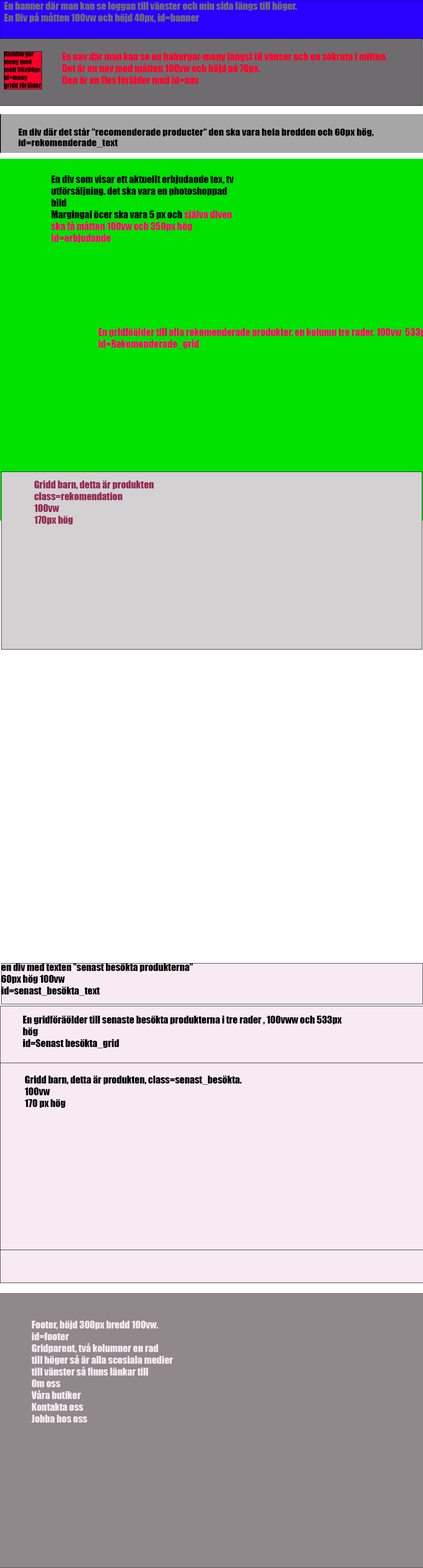
<style>
.page{position:relative;width:423px;height:1568px;background:#ffffff}
.page>*{position:absolute;margin:0}
.t1{font:9.8px "Impact";color:#6f6c70}
.t2{font:6.5px "Impact";color:#020202}
.t3{font:9.8px "Impact";color:#ff002a}
.t4{font:8.8px "Impact";color:#000000;scale:1.13 1}
.t5{font:9.8px "Impact";color:#000000}
.t6{font:9.8px "Impact";color:#ff006a}
.t7{font:9.8px "Impact";color:#952956}
.t8{font:9.8px "Impact";color:#f7eaf0}
</style>
<div class="page">
<p class="t1" style="left:4px;top:2px;width:293px;height:21px">En banner där man kan se loggan till vänster och min sida längs till höger.<br>En Div på måtten 100vw och höjd 40px, id=banner</p>
<p class="t2" style="left:4px;top:51px;width:37px;height:38px">Hamburgar meny med mått 96x96px<br>id=meny<br>gridd förälder</p>
<p class="t3" style="left:62px;top:53px;width:326px;height:31px">En nav där man kan se en haburgar-meny längst til vänser och en sökruta i mitten.<br>Det är en nav med måtten 100vw och höjd på 70px. <br>Den är en flex förälder med id=nav</p>
<p class="t4" style="left:18px;top:128px;width:356px;height:19px">En div där det står ”recomenderade producter” den ska vara hela bredden och 60px hög, id=rekomenderade_text</p>
<p class="t5" style="left:51px;top:175px;width:183px;height:68px">En div som visar ett aktuellt erbjudande tex, tv utförsäljning. det ska vara en photoshoppad bild  <br>Margingal öcer ska vara 5 px och <span class="t6">själva diven ska få måtten 100vw och 350px hög<br>Id=erbjudande</span></p>
<p class="t7" style="left:34px;top:481px;width:120px;height:43px">Gridd barn, detta är produkten <br>class=rekomendation<br>100vw<br>170px hög</p>
<p class="t5" style="left:1px;top:963px;width:192px;height:33px">en div med texten ”senast besökta produkterna”<br>60px hög 100vw<br>id=senast_besökta_text</p>
<p class="t5" style="left:23px;top:1016px;width:319px;height:32px">En gridföräölder till senaste besökta produkterna i tre rader , 100vww och 533px hög<br>id=Senast besökta_grid</p>
<p class="t5" style="left:25px;top:1076px;width:217px;height:32px">Gridd barn, detta är produkten, class=senast_besökta.<br>100vw<br>170 px hög</p>
<p class="t8" style="left:31px;top:1321px;width:142px;height:102px">Footer, höjd 300px bredd 100vw.<br>id=footer<br>Gridparent, två kolumner en rad<br>till höger så är alla scosiala medier<br>till vänster så finns länkar till <br>Om oss<br>Våra butiker<br>Kontakta oss<br>Jobba hos oss</p>
</div>
